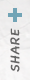
<style>
.page{position:relative;width:30px;height:80px}
.page>*{position:absolute;margin:0}
.t1{font:12.5px "Chalkboard";letter-spacing:0.075em;color:#666666;text-transform:uppercase;font-weight:bold;font-style:italic}
</style>
<div class="page">
<p class="t1" style="left:10px;top:28px;width:10px;height:44px;rotate:-90deg">share</p>
</div>
